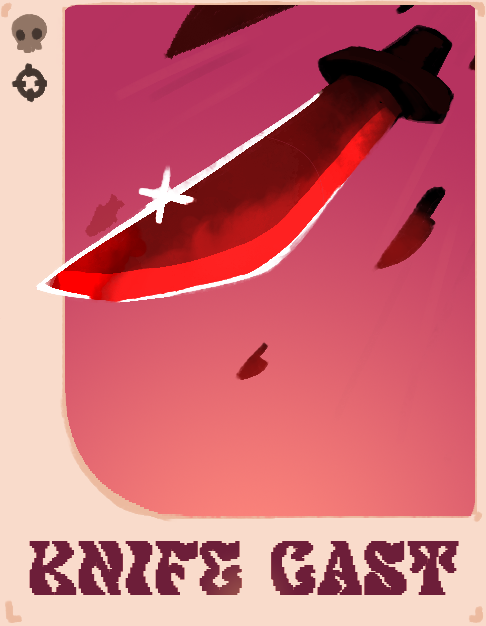
<style>
.page{position:relative;width:486px;height:626px;background:#f9dbcb}
.page>*{position:absolute;margin:0}
.t1{font:70.5px "PixeloutPersonalUseOnly-Reg";color:#6d1e39;font-weight:bold}
</style>
<div class="page">
<p class="t1" style="left:29px;top:541px;width:430px;height:54px">KNIFE CAST</p>
</div>
